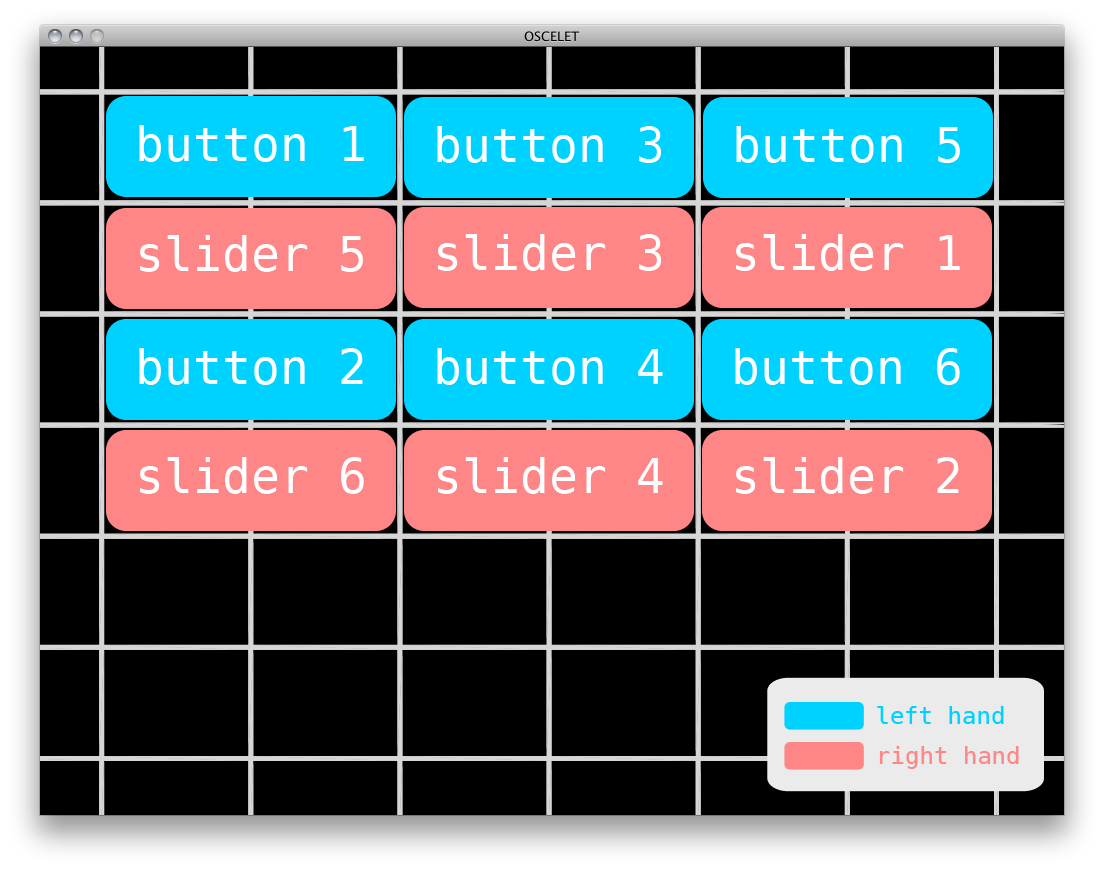
<style>
.page{position:relative;width:1104px;height:870px;background:#000000}
.page>*{position:absolute;margin:0}
.t1{font:48px "DejaVuSansMono";color:#ffffff}
.t2{font:48px "Georgia-Italic";color:#ff8686}
.t3{font:24px "DejaVuSansMono";color:#00d2ff}
.t4{font:24px "DejaVuSansMono";color:#ff8686}
</style>
<div class="page">
<p class="t1" style="left:139px;top:125px;width:225px;height:37px"><span class="t2"><br><br><br></span>button 1</p>
<p class="t1" style="left:437px;top:126px;width:224px;height:37px"><span class="t2"><br><br><br></span>button 3</p>
<p class="t1" style="left:736px;top:126px;width:224px;height:37px"><span class="t2"><br><br><br></span>button 5</p>
<p class="t1" style="left:140px;top:235px;width:223px;height:37px"><span class="t2"><br><br><br></span>slider 5</p>
<p class="t1" style="left:438px;top:234px;width:223px;height:37px"><span class="t2"><br><br><br></span>slider 3</p>
<p class="t1" style="left:736px;top:234px;width:224px;height:37px"><span class="t2"><br><br><br></span>slider 1</p>
<p class="t1" style="left:139px;top:348px;width:224px;height:37px"><span class="t2"><br><br><br></span>button 2</p>
<p class="t1" style="left:437px;top:348px;width:226px;height:37px"><span class="t2"><br><br><br></span>button 4</p>
<p class="t1" style="left:735px;top:348px;width:225px;height:37px"><span class="t2"><br><br><br></span>button 6</p>
<p class="t1" style="left:140px;top:457px;width:224px;height:37px"><span class="t2"><br><br><br></span>slider 6</p>
<p class="t1" style="left:438px;top:457px;width:225px;height:37px"><span class="t2"><br><br><br></span>slider 4</p>
<p class="t1" style="left:736px;top:457px;width:223px;height:37px"><span class="t2"><br><br><br></span>slider 2</p>
<p class="t3" style="left:877px;top:706px;width:127px;height:18px">left hand</p>
<p class="t4" style="left:879px;top:746px;width:140px;height:23px">right hand</p>
</div>
